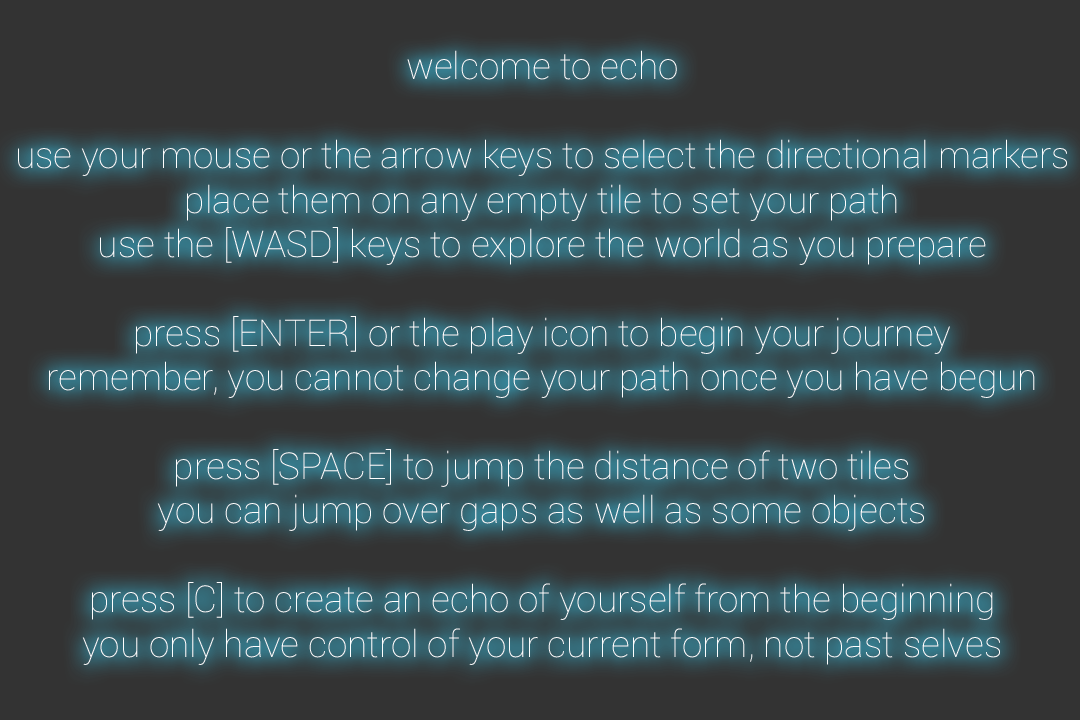
<style>
.page{position:relative;width:1080px;height:720px;background:#333333}
.page>*{position:absolute;margin:0}
.t1{font:37px "Roboto-Thin";color:#ffffff}
</style>
<div class="page">
<p class="t1" style="left:18px;top:50px;width:1049px;height:615px;text-align:center">welcome to echo<br><br>use your mouse or the arrow keys to select the directional markers<br>place them on any empty tile to set your path<br>use the [WASD] keys to explore the world as you prepare<br><br>press [ENTER] or the play icon to begin your journey<br>remember, you cannot change your path once you have begun<br><br>press [SPACE] to jump the distance of two tiles<br>you can jump over gaps as well as some objects<br><br>press [C] to create an echo of yourself from the beginning<br>you only have control of your current form, not past selves</p>
</div>
